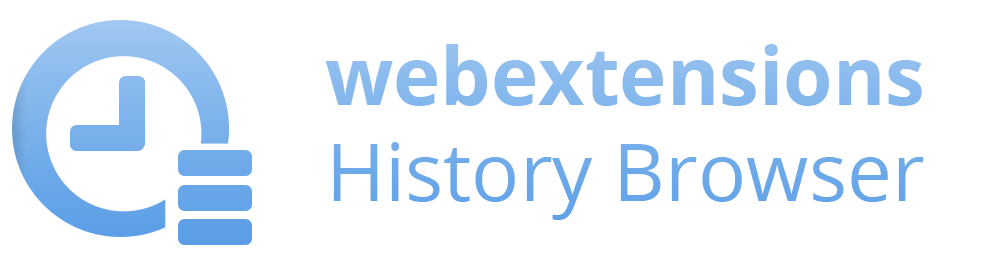
<style>
.page{position:relative;width:996px;height:256px;background:#ffffff}
.page>*{position:absolute;margin:0}
.t1{font:80px "OpenSans"}
.t2{font:80px "OpenSans-Bold"}
</style>
<div class="page">
<p class="t1" style="left:325px;top:44px;width:599px;height:176px;text-align:justify"><span class="t2">webextensions<br></span>History Browser</p>
</div>
